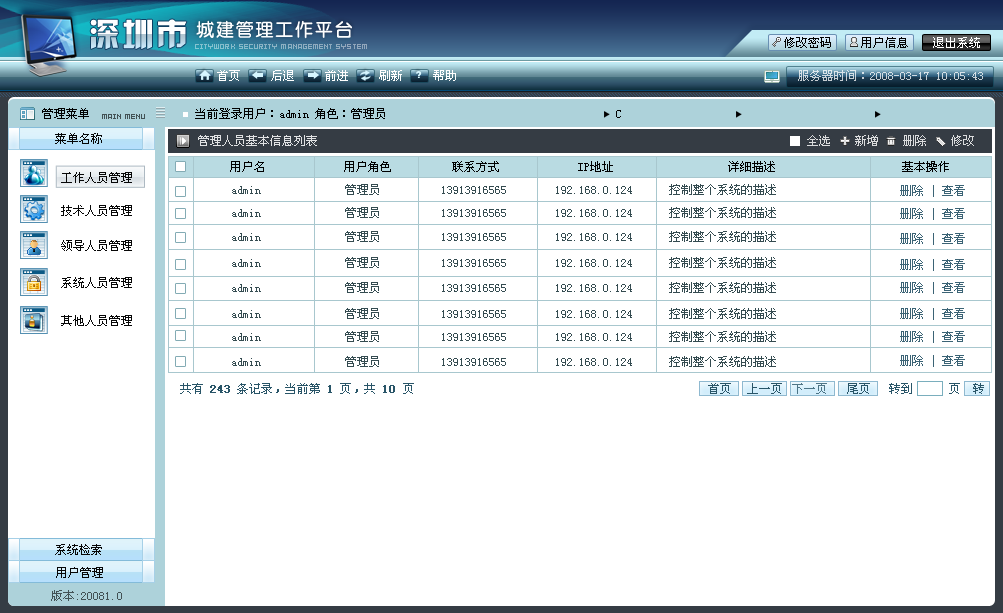
<style>
.page{position:relative;width:1003px;height:613px;background:#ffffff}
.page>*{position:absolute;margin:0}
.t1{font:31.6px "HYk2gj";letter-spacing:0.075em}
.t2{font:18px "FZY3JW--GB1-0";letter-spacing:0.1em;color:#ffffff}
.t3{font:12px "SimSun";color:#000000}
.t4{font:12px "SimSun";color:#ffffff}
.t5{font:8px "SG08";letter-spacing:0.01em;color:#8db2c4}
.t6{font:12px "SimSun";color:#cfdae1}
.t7{font:8px "SG08";color:#435255}
.t8{font:12px "SimSun";color:#070707}
.t9{font:12px "SimSun";color:#e1e2e3}
.t10{font:12px "SimSun";color:#dbdcdd}
.t11{font:12px "SimSun";color:#295568}
.t12{font:12px "SimSun";color:#295568;font-weight:bold}
.t13{font:12px "SimSun";color:#4d7486}
.t14{font:12px "SimSun";color:#435255}
</style>
<div class="page">
<p class="t1" style="left:90px;top:19px;width:97px;height:31px">深圳市</p>
<p class="t2" style="left:196px;top:20px;width:156px;height:19px">城建管理工作平台</p>
<p class="t3" style="left:784px;top:37px;width:47px;height:11px">修改密码</p>
<p class="t3" style="left:861px;top:37px;width:47px;height:11px">用户信息</p>
<p class="t4" style="left:933px;top:37px;width:47px;height:11px">退出系统</p>
<p class="t5" style="left:195px;top:44px;width:172px;height:5px">CITYWORK SECURITY MANAGEMENT SYSTEM</p>
<p class="t4" style="left:217px;top:70px;width:239px;height:11px">首页     后退     前进     刷新     帮助</p>
<p class="t6" style="left:798px;top:70px;width:185px;height:11px">服务器时间：2008-03-17 10:05:43</p>
<p class="t3" style="left:42px;top:108px;width:47px;height:11px">管理菜单</p>
<p class="t3" style="left:195px;top:108px;width:190px;height:11px">当前登录用户：admin 角色：管理员</p>
<p class="t3" style="left:616px;top:110px;width:5px;height:8px">C</p>
<p class="t7" style="left:102px;top:114px;width:43px;height:5px">MAIN MENU</p>
<p class="t8" style="left:55px;top:133px;width:47px;height:11px">菜单名称</p>
<p class="t9" style="left:198px;top:135px;width:119px;height:11px">管理人员基本信息列表</p>
<p class="t10" style="left:807px;top:135px;width:167px;height:11px">全选    新增    删除    修改</p>
<p class="t3" style="left:230px;top:161px;width:719px;height:11px">用户名             用户角色          联系方式             IP地址                   详细描述                     基本操作</p>
<p class="t8" style="left:61px;top:172px;width:71px;height:11px">工作人员管理</p>
<p class="t8" style="left:61px;top:205px;width:71px;height:11px">技术人员管理</p>
<p class="t8" style="left:61px;top:240px;width:71px;height:11px">领导人员管理</p>
<p class="t8" style="left:61px;top:277px;width:71px;height:11px">系统人员管理</p>
<p class="t8" style="left:61px;top:315px;width:71px;height:11px">其他人员管理</p>
<p class="t11" style="left:180px;top:383px;width:234px;height:11px">共有 <span class="t12">243</span> 条记录，当前第 <span class="t12">1</span> 页，共 <span class="t12">10 </span>页</p>
<p class="t11" style="left:708px;top:383px;width:23px;height:11px">首页</p>
<p class="t11" style="left:747px;top:383px;width:35px;height:11px">上一页</p>
<p class="t13" style="left:792px;top:383px;width:35px;height:11px">下一页</p>
<p class="t11" style="left:847px;top:383px;width:137px;height:11px">尾页   转到      页  转</p>
<p class="t8" style="left:55px;top:544px;width:47px;height:11px">系统检索</p>
<p class="t8" style="left:56px;top:567px;width:47px;height:11px">用户管理</p>
<p class="t14" style="left:51px;top:590px;width:71px;height:11px">版本:20081.0</p>
</div>
